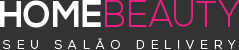
<style>
.page{position:relative;width:239px;height:50px;background:#333333}
.page>*{position:absolute;margin:0}
.t1{font:37.4px "NexaLight";color:#ed1f83;scale:0.94 1}
.t2{font:37.4px "NexaBold";color:#ffffff;scale:0.94 1}
.t3{font:12px "NexaLight";letter-spacing:0.525em;color:#ffffff}
</style>
<div class="page">
<p class="t1" style="left:0px;top:0px;width:240px;height:28px"><span class="t2">HOME</span>BEAUTY</p>
<p class="t3" style="left:3px;top:38px;width:233px;height:11px">SEU SALÃO DELIVERY</p>
</div>
